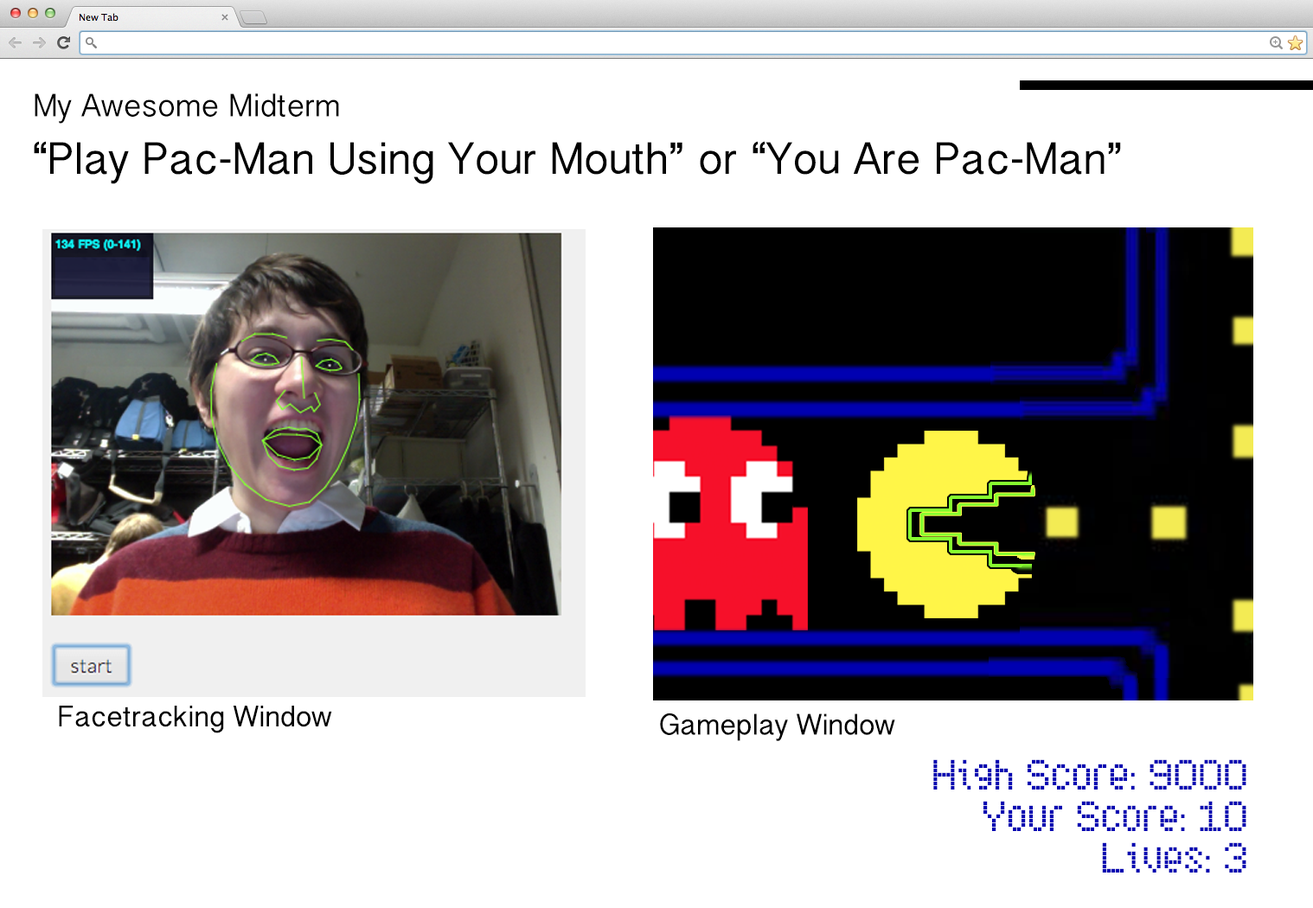
<style>
.page{position:relative;width:1313px;height:908px;background:#ffffff}
.page>*{position:absolute;margin:0}
.t1{font:28.5px "BanglaSangamMN";color:#000000}
.t2{font:39.8px "BanglaSangamMN";color:#000000}
.t3{font:25.9px "BanglaSangamMN";color:#000000}
.t4{font:34.6px "SubwayTicker";color:#0000b1}
</style>
<div class="page">
<p class="t1" style="left:35px;top:93px;width:304px;height:31px">My Awesome Midterm</p>
<p class="t2" style="left:34px;top:141px;width:1087px;height:43px">“Play Pac-Man Using Your Mouth” or “You Are Pac-Man”</p>
<p class="t3" style="left:59px;top:706px;width:273px;height:27px">Facetracking Window</p>
<p class="t3" style="left:660px;top:713px;width:235px;height:28px">Gameplay Window</p>
<p class="t4" style="left:933px;top:759px;width:313px;height:114px;text-align:right">High Score: 9000<br>Your Score: 10<br>Lives: 3</p>
</div>
